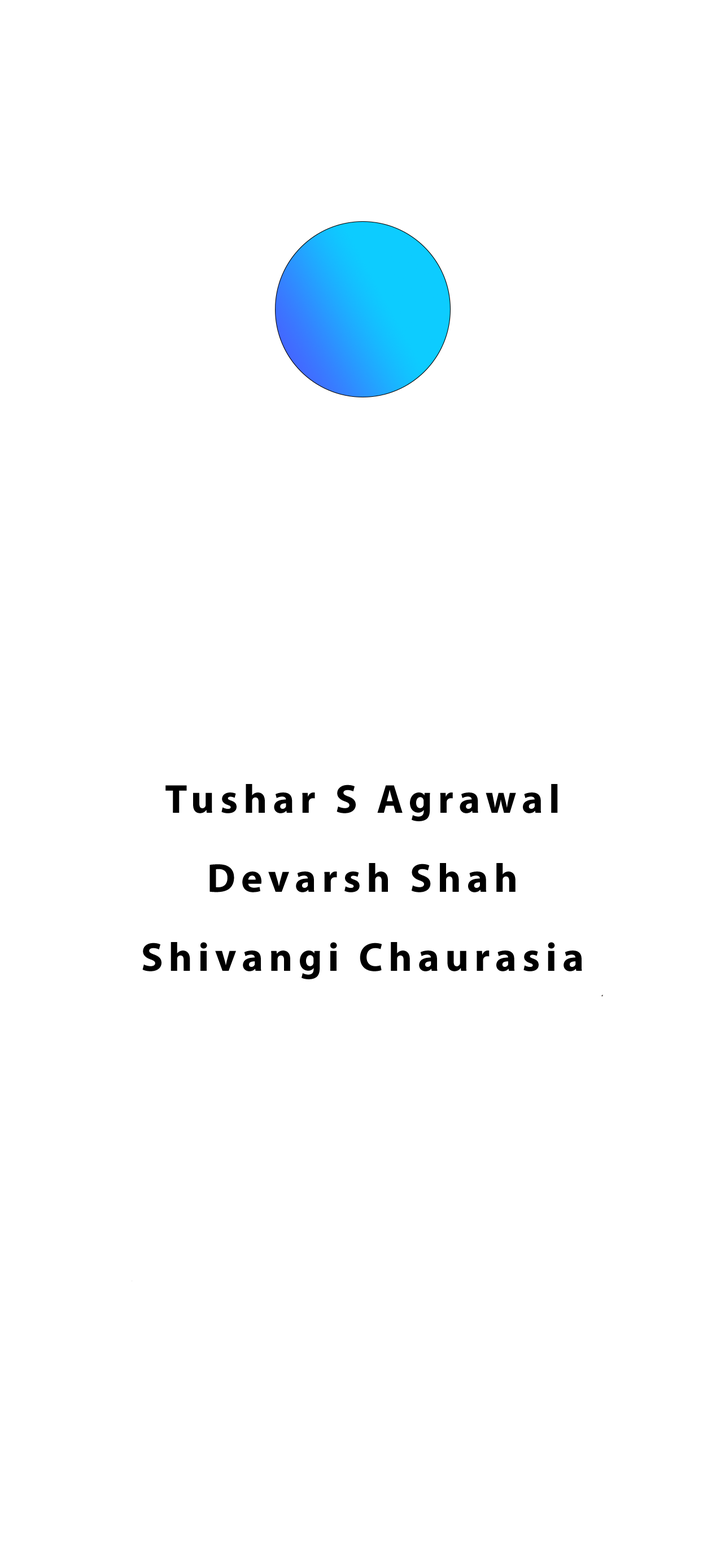
<style>
.page{position:relative;width:725px;height:1568px;background:#ffffff}
.page>*{position:absolute;margin:0}
.t1{font:40.6px/39.5px "MyriadPro-Bold";letter-spacing:0.14em;color:#000000}
</style>
<div class="page">
<p class="t1" style="left:142px;top:784px;width:440px;height:195px;text-align:center">Tushar S Agrawal<br><br>Devarsh Shah<br><br>Shivangi Chaurasia</p>
</div>
